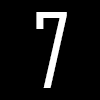
<style>
.page{position:relative;width:100px;height:100px;background:#000000}
.page>*{position:absolute;margin:0}
.t1{font:100px "AgencyFB-Reg";color:#ffffff}
</style>
<div class="page">
<p class="t1" style="left:36px;top:12px;width:31px;height:76px">7</p>
</div>
